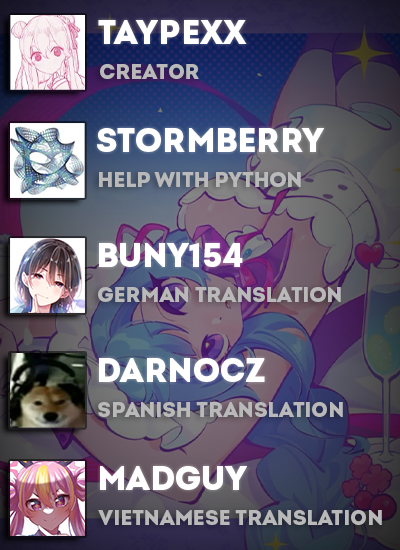
<style>
.page{position:relative;width:400px;height:550px}
.page>*{position:absolute;margin:0}
.t1{font:33.4px "IntroDemo-BlackCAPS";color:#ffffff}
.t2{font:21px "IntroDemo-BlackCAPS";color:#b9b9b9}
</style>
<div class="page">
<p class="t1" style="left:98px;top:20px;width:149px;height:24px">taypexx</p>
<p class="t2" style="left:100px;top:64px;width:99px;height:15px">creator</p>
<p class="t1" style="left:97px;top:128px;width:227px;height:24px">stormberry</p>
<p class="t2" style="left:99px;top:172px;width:202px;height:15px">help with python</p>
<p class="t1" style="left:99px;top:243px;width:144px;height:24px">buny154</p>
<p class="t2" style="left:98px;top:287px;width:243px;height:15px">german translation</p>
<p class="t1" style="left:99px;top:358px;width:166px;height:24px">darnocz</p>
<p class="t2" style="left:98px;top:402px;width:245px;height:15px">spanish translation</p>
<p class="t1" style="left:100px;top:466px;width:147px;height:24px">madguy</p>
<p class="t2" style="left:98px;top:510px;width:284px;height:15px">vietnamese translation</p>
</div>
